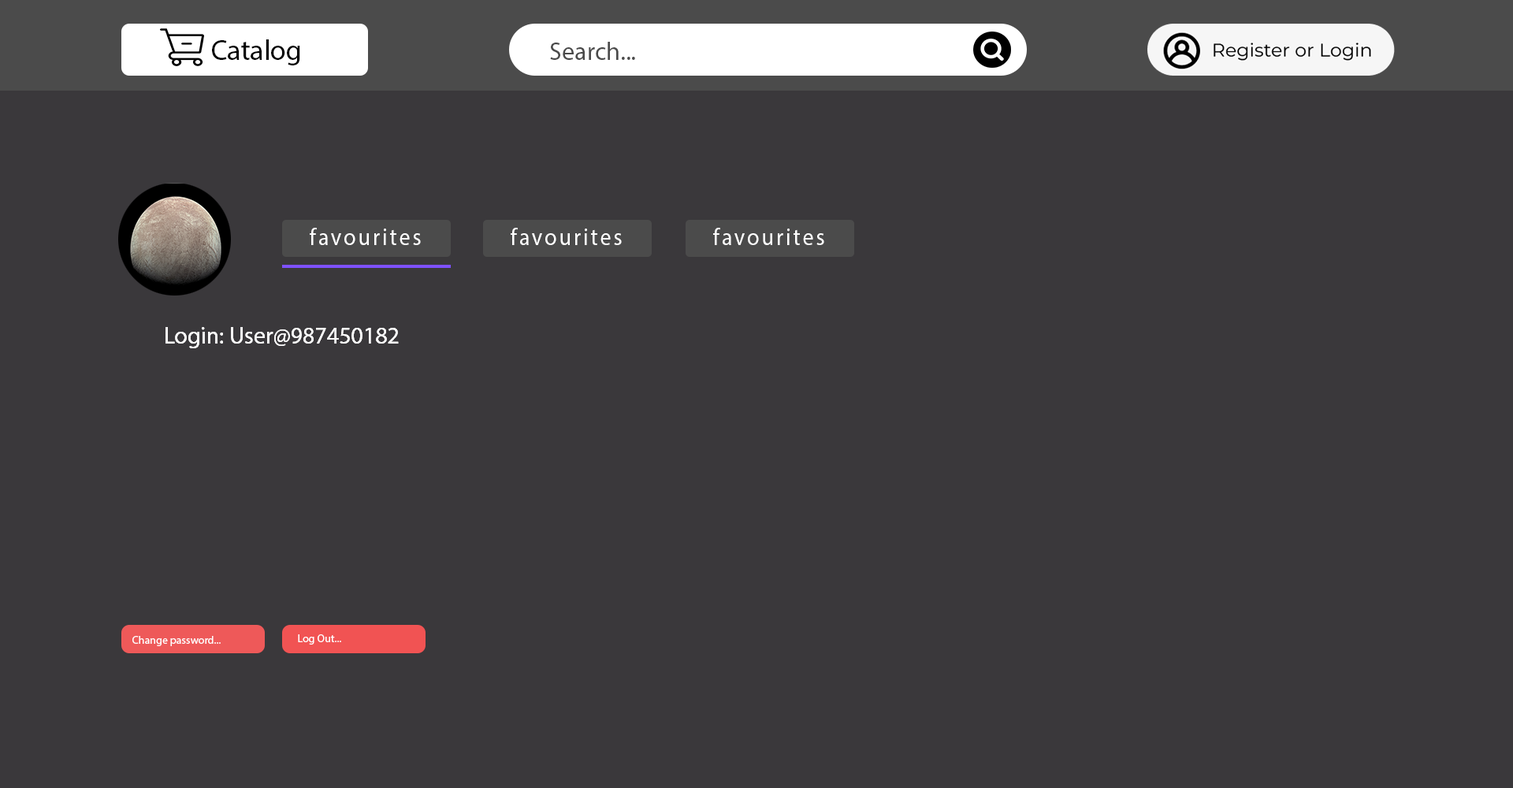
<style>
.page{position:relative;width:1513px;height:788px;background:#3a383b}
.page>*{position:absolute;margin:0}
.t1{font:28.4px "MyriadPro-Regular";color:#000000}
.t2{font:25.2px "MyriadPro-Regular";color:#4a4a4a}
.t3{font:23.6px "MyriadPro-Regular";letter-spacing:0.1em;color:#ffffff;scale:0.94 1}
.t4{font:23.8px "MyriadPro-Regular";color:#fbfbfb}
.t5{font:11px "MyriadPro-Regular";color:#ffffff}
</style>
<div class="page">
<p class="t1" style="left:212px;top:39px;width:88px;height:26px">Catalog</p>
<p class="t2" style="left:550px;top:42px;width:85px;height:18px">Search...</p>
<p class="t3" style="left:310px;top:228px;width:111px;height:17px">favourites</p>
<p class="t3" style="left:511px;top:228px;width:111px;height:17px">favourites</p>
<p class="t3" style="left:713px;top:228px;width:111px;height:17px">favourites</p>
<p class="t4" style="left:165px;top:327px;width:234px;height:21px">Login: User@987450182</p>
<p class="t4" style="left:165px;top:327px;width:234px;height:21px">Login: User@987450182</p>
<p class="t5" style="left:132px;top:636px;width:89px;height:10px">Change password...</p>
<p class="t5" style="left:298px;top:634px;width:43px;height:11px">Log Out...</p>
</div>
